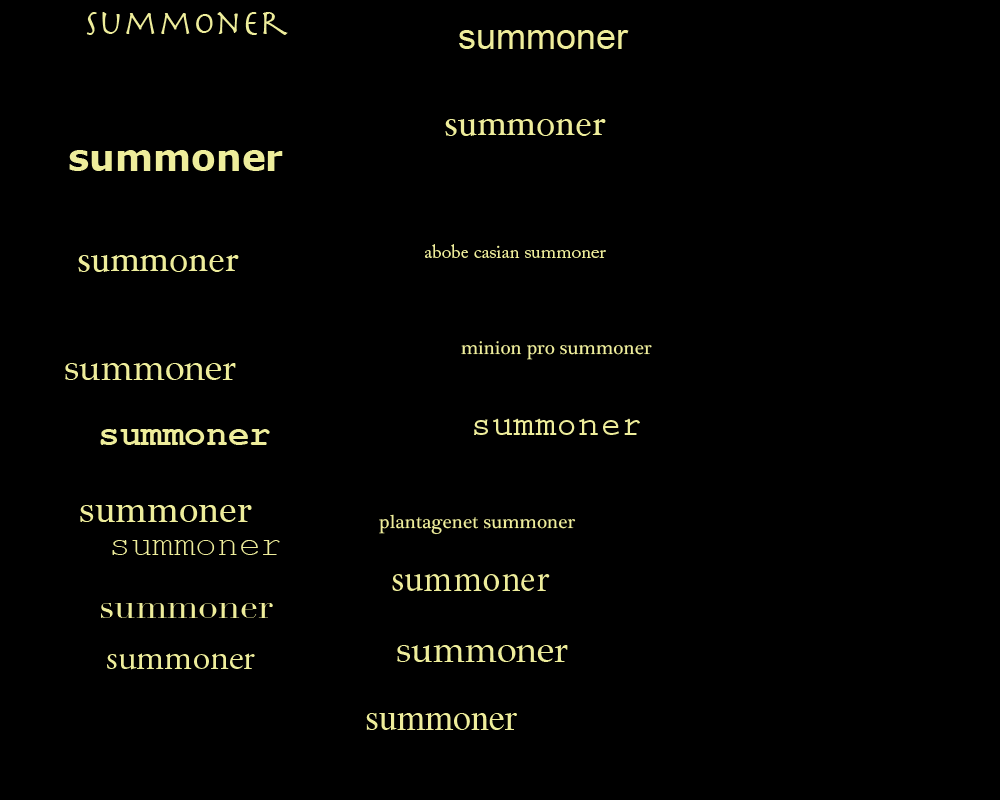
<style>
.page{position:relative;width:1000px;height:800px;background:#000000}
.page>*{position:absolute;margin:0}
.t1{font:36px "Herculanum";color:#eeed9b}
.t2{font:36px "ArialMT";color:#eeed9b}
.t3{font:36px "HoeflerText-Regular";color:#eeed9b}
.t4{font:36px "Verdana-Bold";color:#eeed9b}
.t5{font:19px "ACaslonPro-Regular";color:#eeed9b}
.t6{font:19px "PlantagenetCherokee";color:#eeed9b}
.t7{font:36px "Palatino-Roman";color:#eeed9b}
.t8{font:36px "PrestigeEliteStd-Bd";color:#eeed9b}
.t9{font:36px "CourierNewPS-BoldMT";color:#eeed9b}
.t10{font:36px "Georgia";color:#eeed9b}
.t11{font:36px "CourierNewPSMT";color:#eeed9b}
.t12{font:36px "MinionPro-Regular";color:#eeed9b}
.t13{font:36px "Didot";color:#eeed9b}
.t14{font:36px "AGaramondPro-Regular";color:#eeed9b}
.t15{font:36px "Times-Roman";color:#eeed9b}
</style>
<div class="page">
<p class="t1" style="left:86px;top:12px;width:202px;height:23px">summoner</p>
<p class="t2" style="left:459px;top:30px;width:170px;height:19px">summoner</p>
<p class="t3" style="left:445px;top:119px;width:161px;height:17px">summoner</p>
<p class="t4" style="left:69px;top:150px;width:214px;height:21px">summoner</p>
<p class="t5" style="left:425px;top:244px;width:181px;height:14px">abobe casian summoner</p>
<p class="t3" style="left:78px;top:255px;width:161px;height:17px">summoner</p>
<p class="t6" style="left:461px;top:341px;width:191px;height:19px">minion pro summoner</p>
<p class="t7" style="left:65px;top:363px;width:171px;height:17px">summoner</p>
<p class="t8" style="left:474px;top:418px;width:166px;height:17px">summoner</p>
<p class="t9" style="left:100px;top:429px;width:170px;height:16px">summoner</p>
<p class="t10" style="left:80px;top:505px;width:172px;height:17px">summoner</p>
<p class="t6" style="left:379px;top:514px;width:197px;height:21px">plantagenet summoner</p>
<p class="t11" style="left:112px;top:540px;width:168px;height:15px">summoner</p>
<p class="t12" style="left:392px;top:574px;width:158px;height:18px">summoner</p>
<p class="t13" style="left:101px;top:603px;width:172px;height:15px">summoner</p>
<p class="t14" style="left:107px;top:653px;width:148px;height:17px">summoner</p>
<p class="t7" style="left:397px;top:645px;width:171px;height:17px">summoner</p>
<p class="t15" style="left:366px;top:713px;width:151px;height:17px">summoner</p>
</div>
